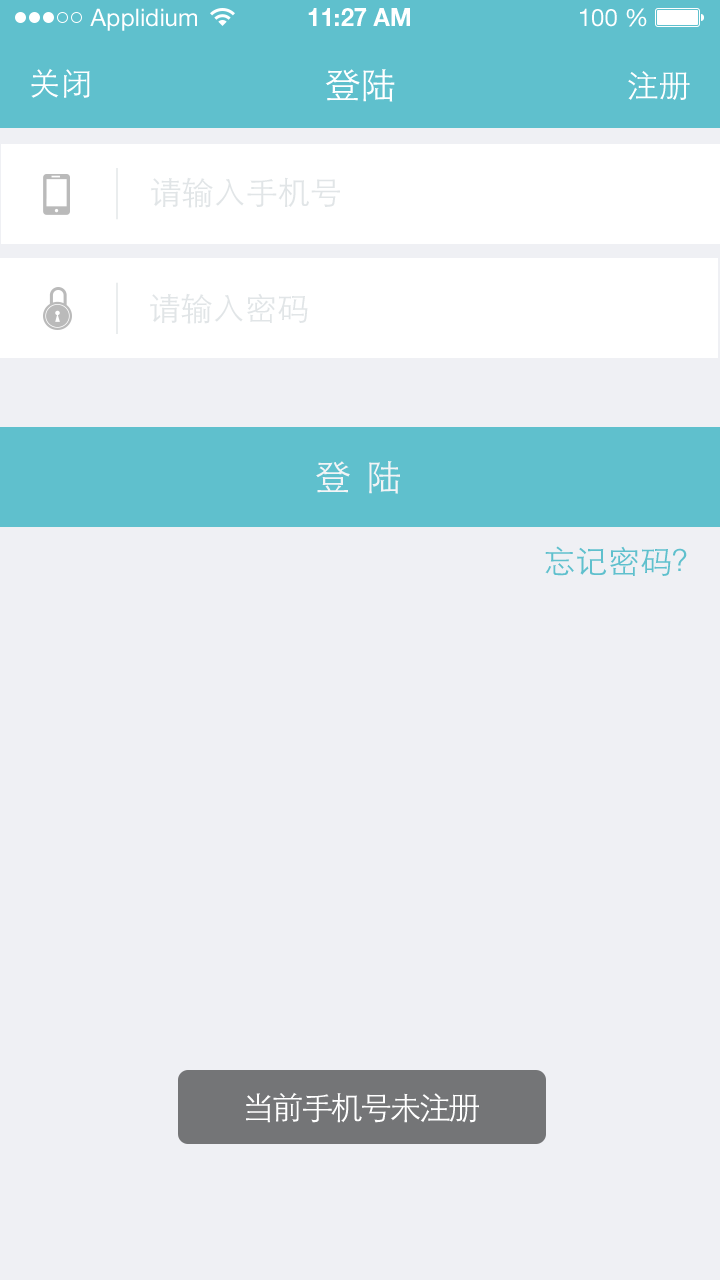
<style>
.page{position:relative;width:720px;height:1280px;background:#eff0f4}
.page>*{position:absolute;margin:0}
.t1{font:32px "STHeitiSC-Light";color:#ffffff}
.t2{font:36px "STHeitiSC-Light";color:#ffffff}
.t3{font:32px "STHeitiSC-Light";color:#e1e5e7}
.t4{font:36px "STHeitiSC-Light";letter-spacing:-0.08em;color:#f3f4f6}
.t5{font:32px "STHeitiSC-Light";color:#5fc0cd}
.t6{font:32px "STHeitiSC-Light";letter-spacing:-0.08em;color:#ffffff}
</style>
<div class="page">
<p class="t1" style="left:31px;top:68px;width:59px;height:30px">关闭</p>
<p class="t2" style="left:325px;top:69px;width:70px;height:33px">登陆</p>
<p class="t1" style="left:628px;top:71px;width:62px;height:29px">注册</p>
<p class="t3" style="left:151px;top:177px;width:189px;height:31px">请输入手机号</p>
<p class="t3" style="left:150px;top:293px;width:158px;height:31px">请输入密码</p>
<p class="t4" style="left:316px;top:461px;width:84px;height:33px">登   陆</p>
<p class="t5" style="left:545px;top:546px;width:142px;height:30px">忘记密码？</p>
<p class="t6" style="left:246px;top:1092px;width:233px;height:31px">当前手机号未注册</p>
</div>
